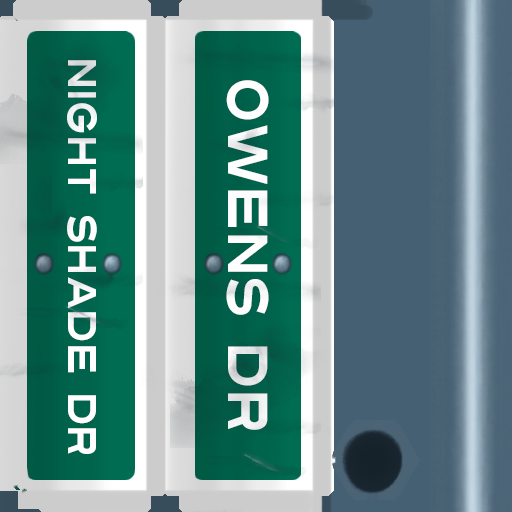
<style>
.page{position:relative;width:512px;height:512px}
.page>*{position:absolute;margin:0}
.t1{font:40px "Turnpike";color:#fefeff;scale:0.75 1}
.t2{font:56px "Turnpike";color:#fefeff;scale:0.75 1}
</style>
<div class="page">
<p class="t1" style="left:67px;top:60px;width:30px;height:394px;rotate:90deg">Night Shade Dr</p>
<p class="t2" style="left:226px;top:80px;width:43px;height:350px;rotate:90deg">Owens Dr</p>
</div>
